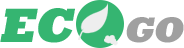
<style>
.page{position:relative;width:184px;height:48px;background:#ffffff}
.page>*{position:absolute;margin:0}
.t1{font:49px "Rockwell-ExtraBold";letter-spacing:-0.04em;color:#35b571;font-style:italic}
.t2{font:36px "Rockwell-ExtraBold";letter-spacing:-0.04em;color:#a0a0a0;font-style:italic}
</style>
<div class="page">
<p class="t1" style="left:0px;top:8px;width:184px;height:35px">EC       <span class="t2">GO</span></p>
</div>
